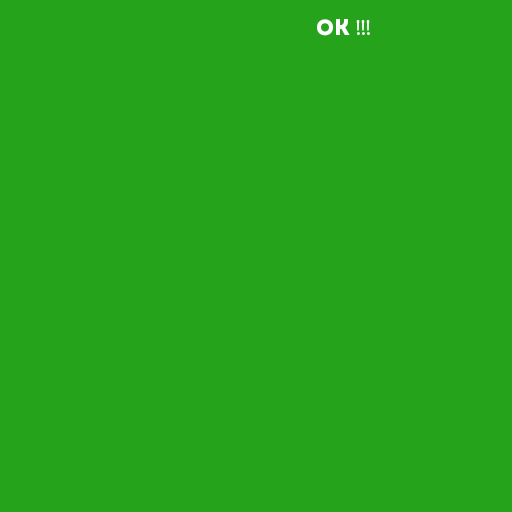
<style>
.page{position:relative;width:512px;height:512px;background:#25a31b}
.page>*{position:absolute;margin:0}
.t1{font:22px "MyriadPro-Regular";color:#ffffff}
.t2{font:22px "Intro";color:#ffffff}
</style>
<div class="page">
<p class="t1" style="left:317px;top:19px;width:53px;height:17px"><span class="t2">OK </span>!!!</p>
</div>
